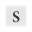
<style>
.page{position:relative;width:32px;height:32px;background:#ffffff}
.page>*{position:absolute;margin:0}
.t1{font:16px "MinionPro-Bold";color:#333333}
</style>
<div class="page">
<p class="t1" style="left:12px;top:11px;width:8px;height:12px">S</p>
</div>
